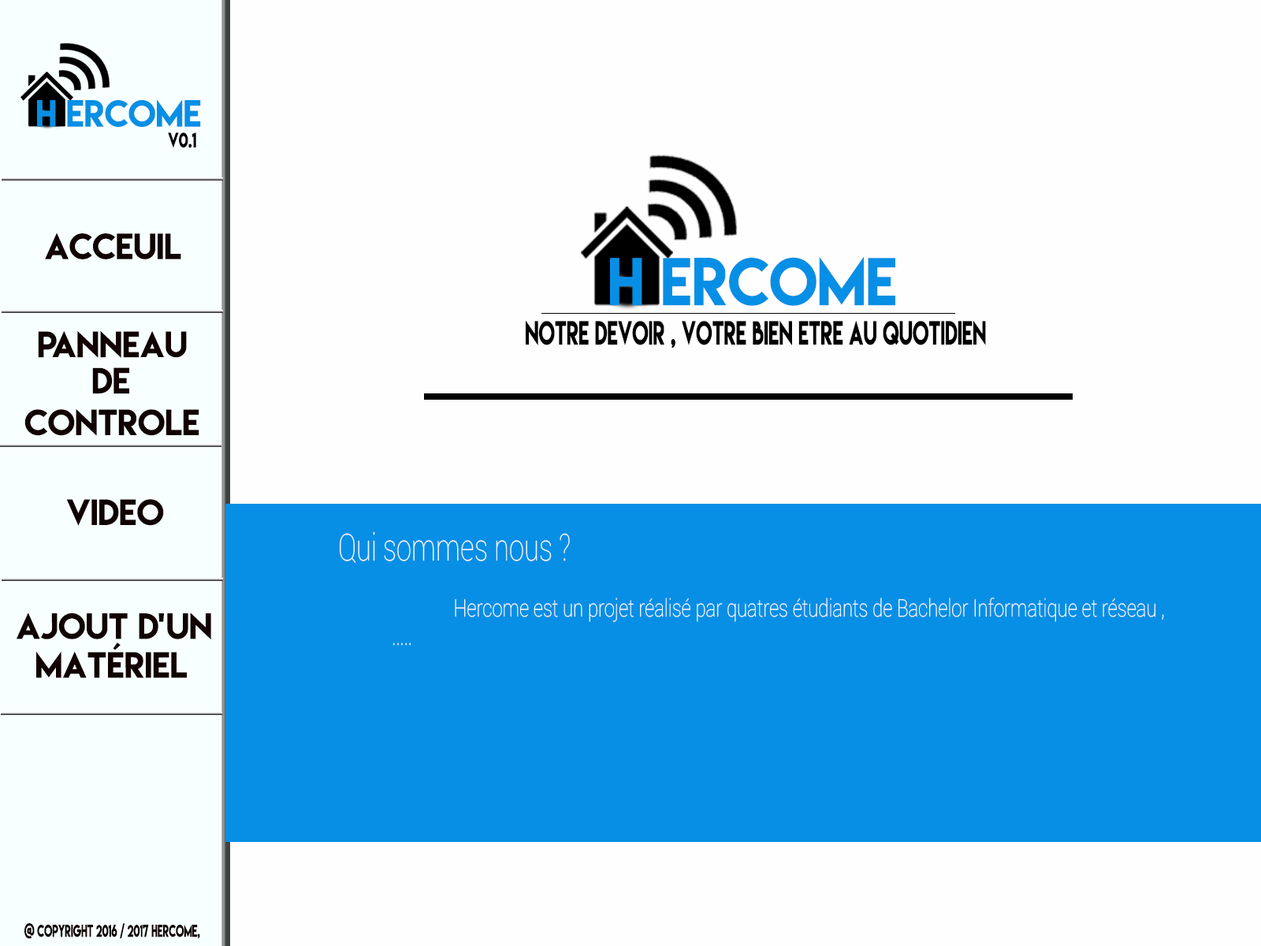
<style>
.page{position:relative;width:1261px;height:946px;background:#fffefe}
.page>*{position:absolute;margin:0}
.t1{font:33.5px "LemonMilk";color:#078fe5}
.t2{font:18.7px "LemonMilk";color:#000000;scale:0.78 1}
.t3{font:32.3px "LemonMilk";color:#110202}
.t4{font:60.1px "LemonMilk";color:#078fe5;scale:0.96 1}
.t5{font:29.8px "LemonMilk";color:#000000;scale:0.65 1}
.t6{font:37.3px "Roboto-Thin";color:#f3f8ff;scale:0.73 1}
.t7{font:24px "Roboto-Thin";color:#f3f8ff;scale:0.79 1}
.t8{font:15.1px "LemonMilk";color:#110202;scale:0.64 1}
</style>
<div class="page">
<p class="t1" style="left:37px;top:99px;width:164px;height:28px">H ercome</p>
<p class="t2" style="left:168px;top:132px;width:28px;height:16px">v0.1</p>
<p class="t3" style="left:45px;top:232px;width:136px;height:27px">Acceuil</p>
<p class="t4" style="left:610px;top:257px;width:285px;height:49px">H ercome</p>
<p class="t5" style="left:526px;top:320px;width:460px;height:28px">notre devoir , votre bien etre au quotidien</p>
<p class="t3" style="left:38px;top:331px;width:149px;height:27px">panneau</p>
<p class="t3" style="left:92px;top:367px;width:37px;height:27px">DE</p>
<p class="t3" style="left:24px;top:409px;width:175px;height:27px">CONTROLE</p>
<p class="t3" style="left:66px;top:499px;width:98px;height:27px">Video</p>
<p class="t6" style="left:340px;top:531px;width:230px;height:32px">Qui sommes nous ?</p>
<p class="t7" style="left:393px;top:597px;width:771px;height:48px">Hercome est un projet réalisé par quatres étudiants de Bachelor Informatique et réseau , <br>.....</p>
<p class="t3" style="left:17px;top:612px;width:194px;height:66px">Ajout d’un<br>  Matériel</p>
<p class="t8" style="left:24px;top:923px;width:176px;height:16px">@ Copyright 2016 / 2017 Hercome,</p>
</div>
